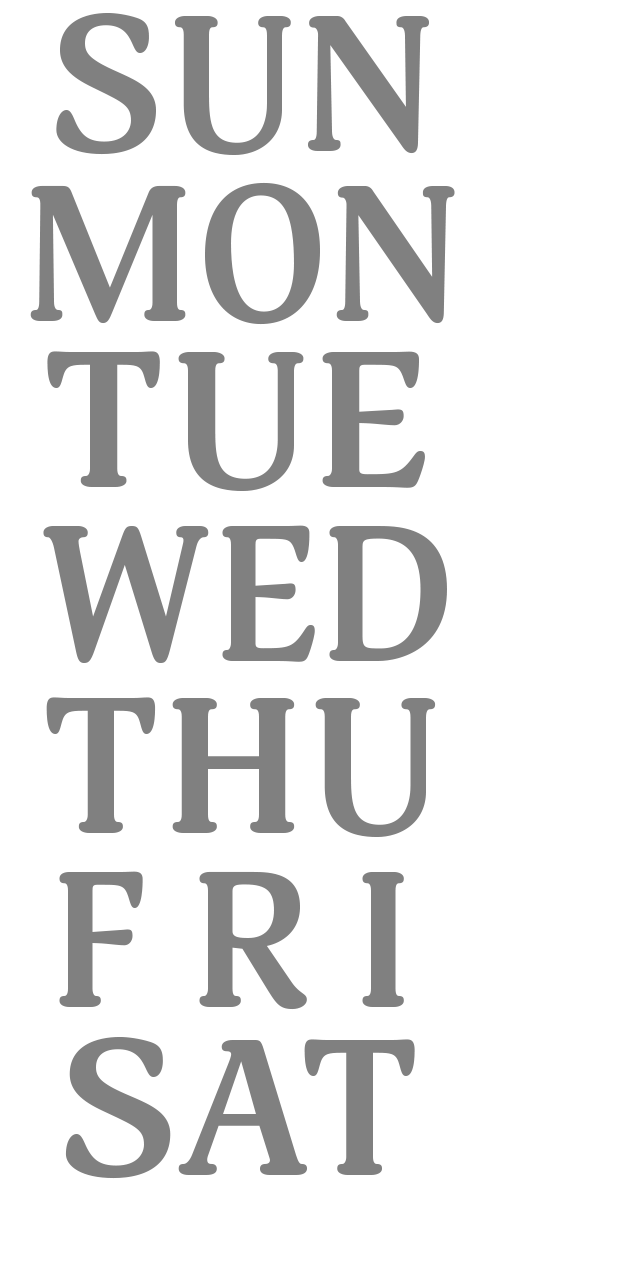
<style>
.page{position:relative;width:640px;height:1280px;background:#ffffff}
.page>*{position:absolute;margin:0}
.t1{font:190.6px "Adonis-Bold";color:#808080}
.t2{font:190.6px "Adonis-Bold";color:#808080;scale:1.07 1}
.t3{font:190.6px "Adonis-Bold";color:#808080;scale:0.97 1}
.t4{font:190.6px "Adonis-Bold";color:#808080;scale:1.04 1}
.t5{font:190.6px "Adonis-Bold";color:#808080;scale:1.05 1}
</style>
<div class="page">
<p class="t1" style="left:56px;top:12px;width:374px;height:143px">SUN</p>
<p class="t1" style="left:30px;top:182px;width:425px;height:143px">MON</p>
<p class="t2" style="left:47px;top:351px;width:378px;height:140px">TUE</p>
<p class="t3" style="left:43px;top:525px;width:404px;height:138px">WED</p>
<p class="t4" style="left:46px;top:697px;width:390px;height:140px">THU</p>
<p class="t3" style="left:59px;top:871px;width:345px;height:139px">F R I</p>
<p class="t5" style="left:65px;top:1036px;width:350px;height:143px">SAT</p>
</div>
